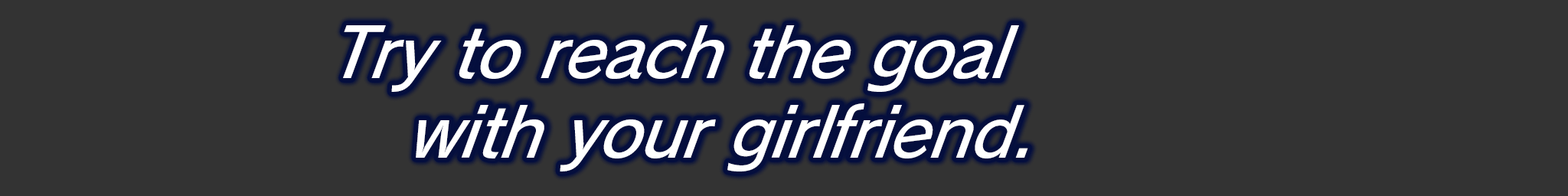
<style>
.page{position:relative;width:1568px;height:196px;background:#333333}
.page>*{position:absolute;margin:0}
.t1{font:72px "RodinPro-DB";letter-spacing:-0.02em;color:#ffffff;scale:0.94 1}
</style>
<div class="page">
<p class="t1" style="left:343px;top:25px;width:676px;height:67px">Try to reach the goal</p>
<p class="t1" style="left:416px;top:103px;width:612px;height:69px">with your girlfriend.</p>
</div>
